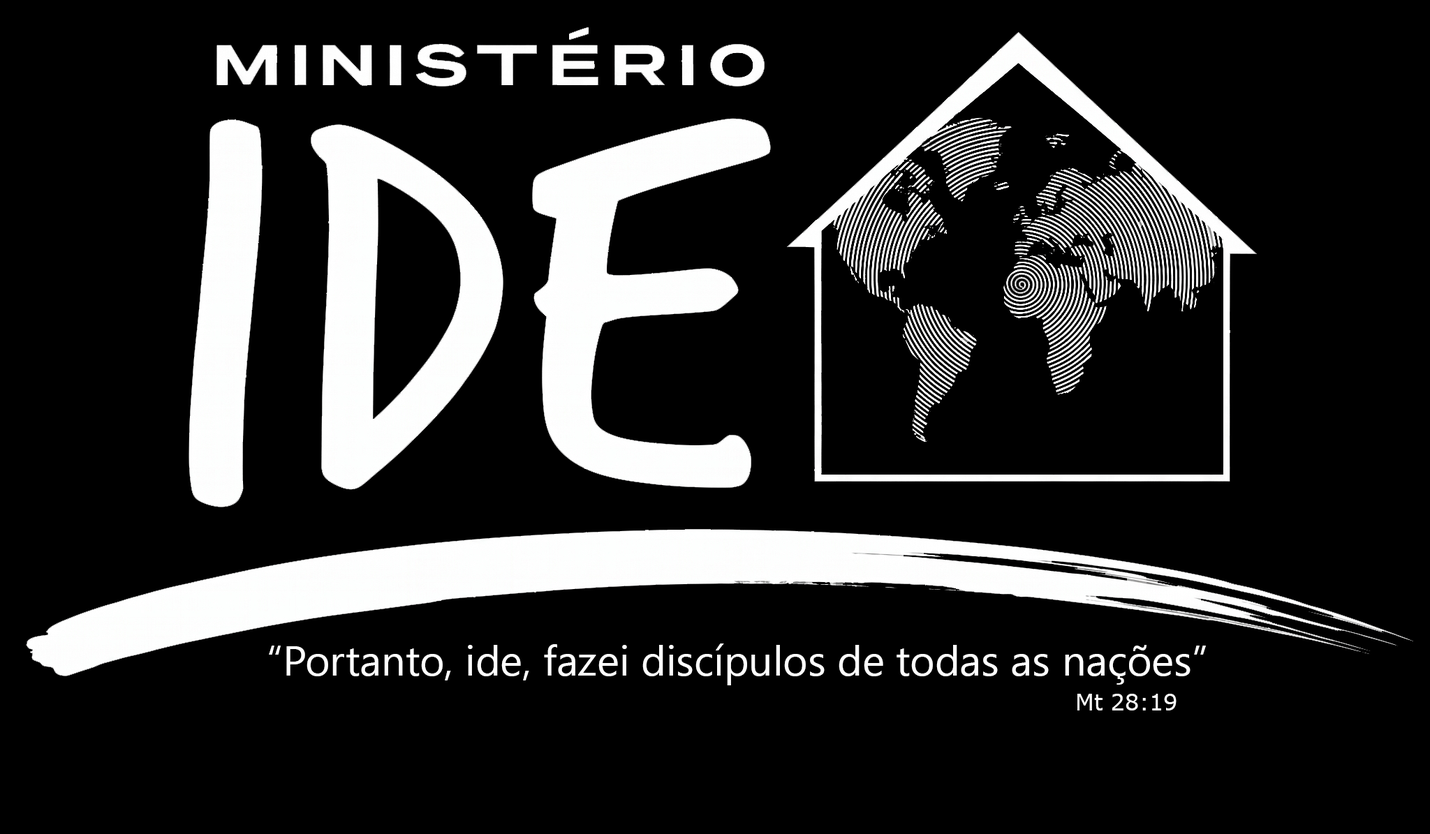
<style>
.page{position:relative;width:1430px;height:834px;background:#000000}
.page>*{position:absolute;margin:0}
.t1{font:42.1px "SegoeUIHistoric";color:#ffffff}
.t2{font:22.4px "Verdana";color:#ffffff}
</style>
<div class="page">
<p class="t1" style="left:269px;top:644px;width:936px;height:41px">“Portanto, ide, fazei discípulos de todas as nações”</p>
<p class="t2" style="left:1077px;top:694px;width:99px;height:17px">Mt 28:19</p>
</div>
